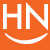
<style>
.page{position:relative;width:50px;height:50px;background:#f26522}
.page>*{position:absolute;margin:0}
.t1{font:33.3px "Futura-Medium";letter-spacing:-0.025em;color:#ffffff}
.t2{font:50px "GoudyOldStyleT-Regular";letter-spacing:0.05em;color:#ffffff}
</style>
<div class="page">
<p class="t1" style="left:3px;top:2px;width:45px;height:29px">HN</p>
<p class="t2" style="left:5px;top:33px;width:43px;height:11px;rotate:-90deg">(</p>
</div>
